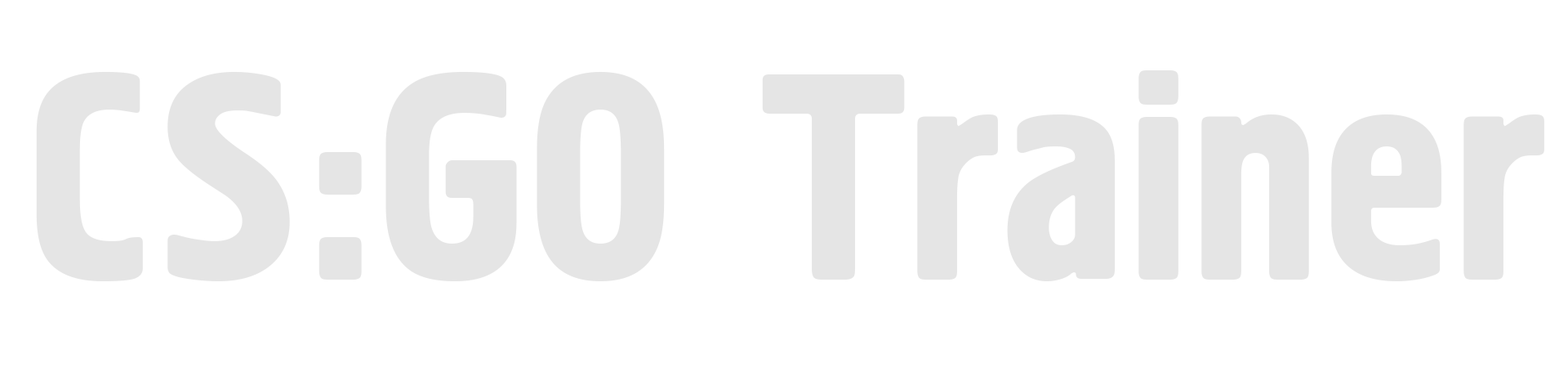
<style>
.page{position:relative;width:1568px;height:390px;background:#ffffff}
.page>*{position:absolute;margin:0}
.t1{font:291.3px "Hermes";color:#e5e5e5}
</style>
<div class="page">
<p class="t1" style="left:36px;top:70px;width:1508px;height:211px">CS:GO Trainer</p>
</div>
